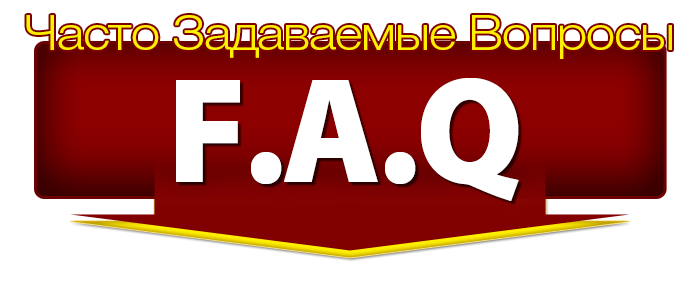
<style>
.page{position:relative;width:700px;height:300px;background:#ffffff}
.page>*{position:absolute;margin:0}
.t1{font:48px "Helvetica-4-Light";letter-spacing:-0.025em;color:#fff000;scale:1.1 1}
.t2{font:151.9px "MyriadPro-Black";letter-spacing:-0.025em;color:#ffffff;scale:0.97 1}
</style>
<div class="page">
<p class="t1" style="left:26px;top:15px;width:646px;height:44px">Часто Задаваемые Вопросы</p>
<p class="t2" style="left:176px;top:78px;width:343px;height:123px">F.A.Q</p>
</div>
